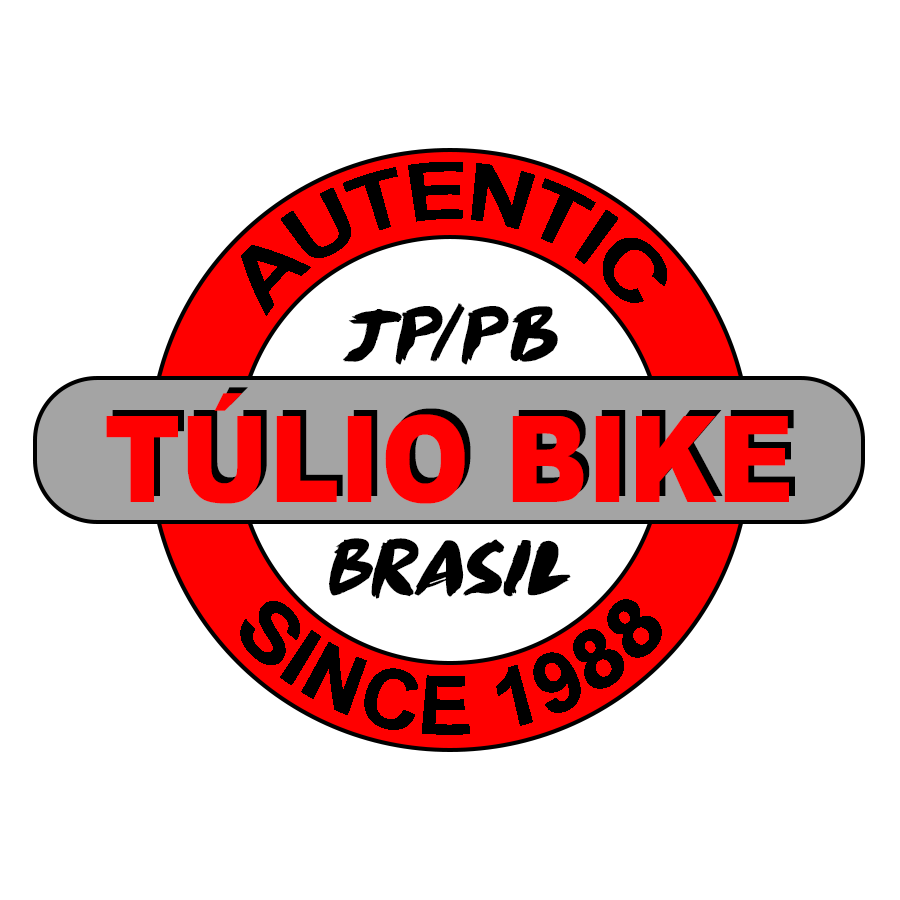
<style>
.page{position:relative;width:900px;height:900px;background:#ffffff}
.page>*{position:absolute;margin:0}
.t1{font:80px "ArialNarrow-Bold";color:#000000}
.t2{font:83px "RadicalBrushDEMO-Regular";color:#000000}
.t3{font:120px "Arial-Black";color:#ff0001;scale:0.88 1}
.t4{font:80px "ArialNarrow-Bold";color:#000000;scale:0.94 1}
</style>
<div class="page">
<p class="t1" style="left:241px;top:162px;width:426px;height:154px">AUTENTIC</p>
<p class="t2" style="left:343px;top:303px;width:215px;height:62px">jp/pb</p>
<p class="t3" style="left:112px;top:387px;width:683px;height:111px">TÚLIO BIKE</p>
<p class="t3" style="left:106px;top:393px;width:683px;height:111px">TÚLIO BIKE</p>
<p class="t2" style="left:329px;top:538px;width:242px;height:61px">Brasil</p>
<p class="t4" style="left:240px;top:599px;width:422px;height:136px">SINCE 1988</p>
</div>
